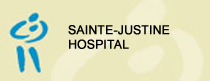
<style>
.page{position:relative;width:210px;height:81px;background:#ebe8bd}
.page>*{position:absolute;margin:0}
.t1{font:12px "ArialMT";color:#000000;font-weight:bold}
</style>
<div class="page">
<p class="t1" style="left:68px;top:25px;width:102px;height:24px">SAINTE-JUSTINE<br>HOSPITAL</p>
</div>
